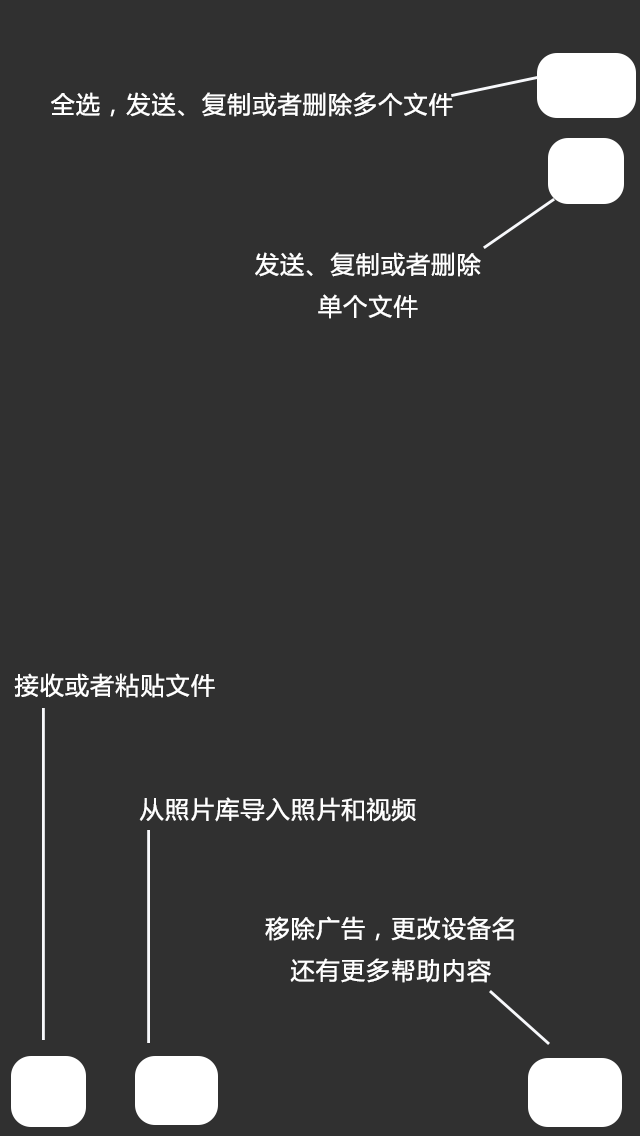
<style>
.page{position:relative;width:640px;height:1136px;background:#303030}
.page>*{position:absolute;margin:0}
.t1{font:24px "MicrosoftYaHei";letter-spacing:0.05em;color:#ffffff}
</style>
<div class="page">
<p class="t1" style="left:51px;top:92px;width:402px;height:25px">全选，发送、复制或者删除多个文件</p>
<p class="t1" style="left:255px;top:252px;width:226px;height:67px;text-align:center">发送、复制或者删除<br>单个文件</p>
<p class="t1" style="left:14px;top:673px;width:201px;height:25px">接收或者粘贴文件</p>
<p class="t1" style="left:139px;top:797px;width:277px;height:25px">从照片库导入照片和视频</p>
<p class="t1" style="left:265px;top:916px;width:249px;height:67px;text-align:center">移除广告，更改设备名<br>还有更多帮助内容</p>
</div>
